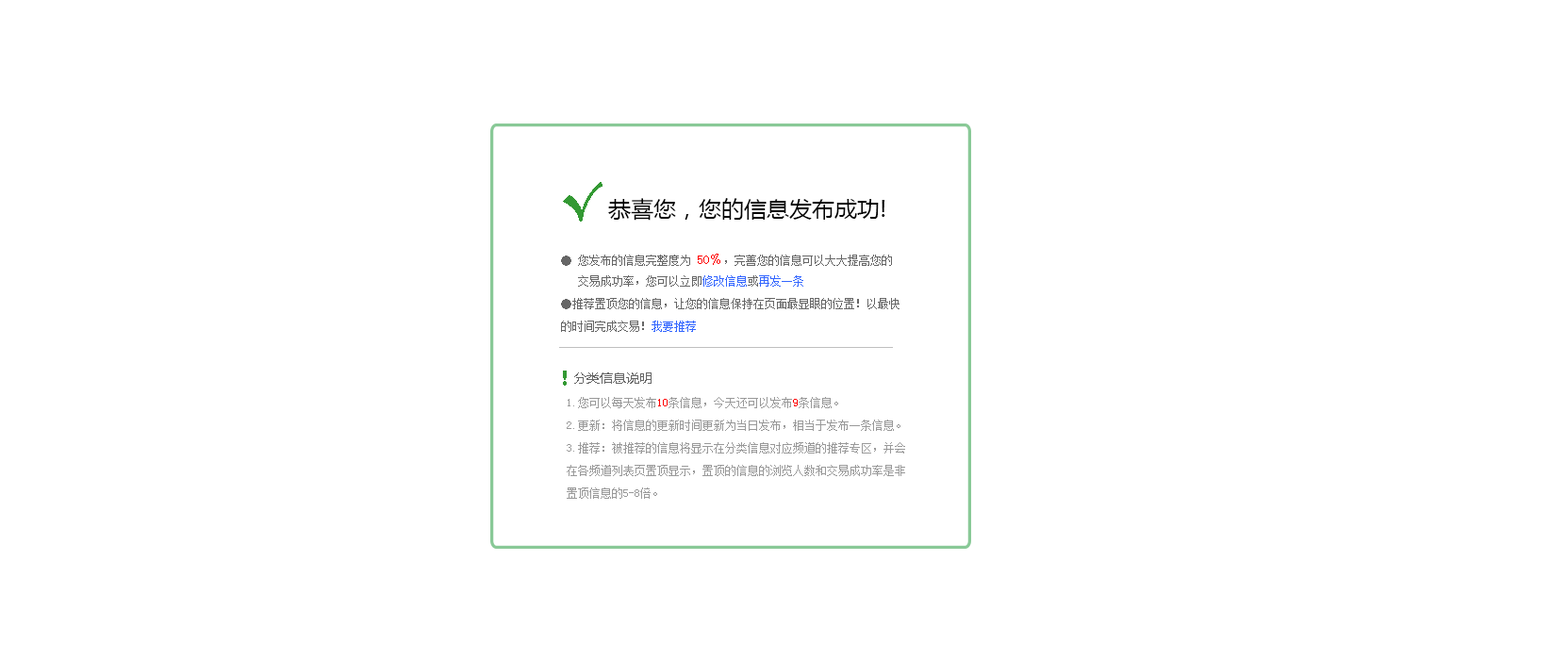
<style>
.page{position:relative;width:1568px;height:660px;background:#ffffff}
.page>*{position:absolute;margin:0}
.t1{font:49px "BerlinSansFBDemi-Bold";color:#339933}
.t2{font:22.6px "MicrosoftYaHei";color:#000000}
.t3{font:11.3px/22.6px "SimSun";color:#666666}
.t4{font:13.2px/22.6px "SimSun";color:#ff0000}
.t5{font:11.3px/22.6px "SimSun";color:#3366ff}
.t6{font:22.6px "BerlinSansFBDemi-Bold";color:#339933}
.t7{font:13.2px "MicrosoftYaHei";color:#666666}
.t8{font:11.3px/22.6px "SimSun";color:#999999}
.t9{font:11.3px/22.6px "SimSun";color:#ff0000}
</style>
<div class="page">
<p class="t1" style="left:563px;top:182px;width:39px;height:40px">√</p>
<p class="t2" style="left:608px;top:198px;width:277px;height:23px">恭喜您，您的信息发布成功!</p>
<p class="t3" style="left:561px;top:254px;width:339px;height:78px">● 您发布的信息完整度为 <span class="t4">50﹪</span>，完善您的信息可以大大提高您的<br>   交易成功率，您可以立即<span class="t5">修改信息</span>或<span class="t5">再发一条<br></span>●推荐置顶您的信息，让您的信息保持在页面最显眼的位置！以最快<br>的时间完成交易！<span class="t5">我要推荐</span></p>
<p class="t6" style="left:563px;top:371px;width:4px;height:15px">!</p>
<p class="t7" style="left:574px;top:372px;width:78px;height:12px">分类信息说明</p>
<p class="t8" style="left:567px;top:397px;width:338px;height:102px">1.您可以每天发布<span class="t9">10</span>条信息，今天还可以发布<span class="t9">9</span>条信息。<br>2.更新：将信息的更新时间更新为当日发布，相当于发布一条信息。<br>3.推荐：被推荐的信息将显示在分类信息对应频道的推荐专区，并会<br>在各频道列表页置顶显示，置顶的信息的浏览人数和交易成功率是非<br>置顶信息的5-8倍。</p>
</div>
